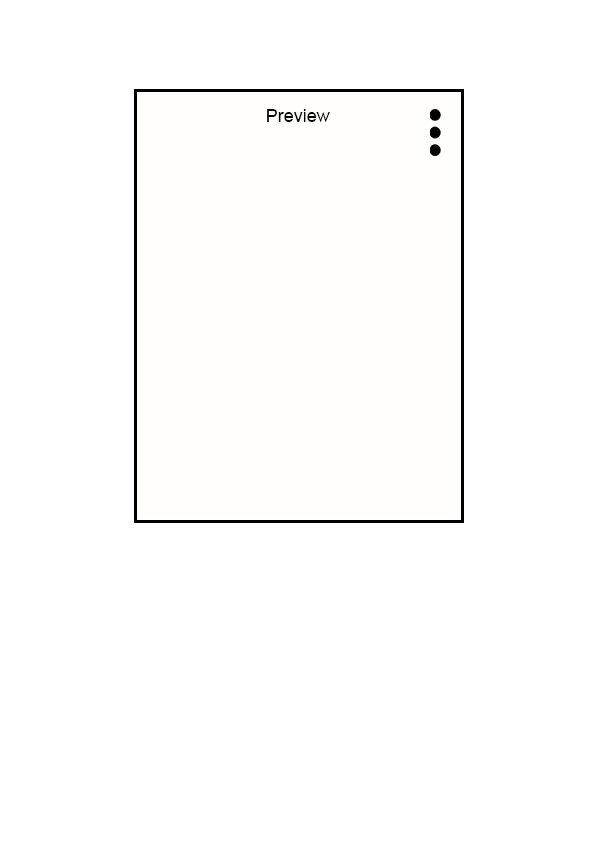
<style>
.page{position:relative;width:595px;height:842px;background:#ffffff}
.page>*{position:absolute;margin:0}
.t1{font:18px "ArialMT";color:#000000}
</style>
<div class="page">
<p class="t1" style="left:267px;top:109px;width:63px;height:13px">Preview</p>
</div>
